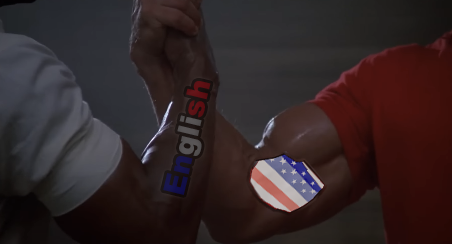
<style>
.page{position:relative;width:452px;height:244px}
.page>*{position:absolute;margin:0}
.t1{font:29.6px "Arial-Black"}
</style>
<div class="page">
<p class="t1" style="left:163px;top:81px;width:48px;height:114px;rotate:-77deg">English</p>
</div>
